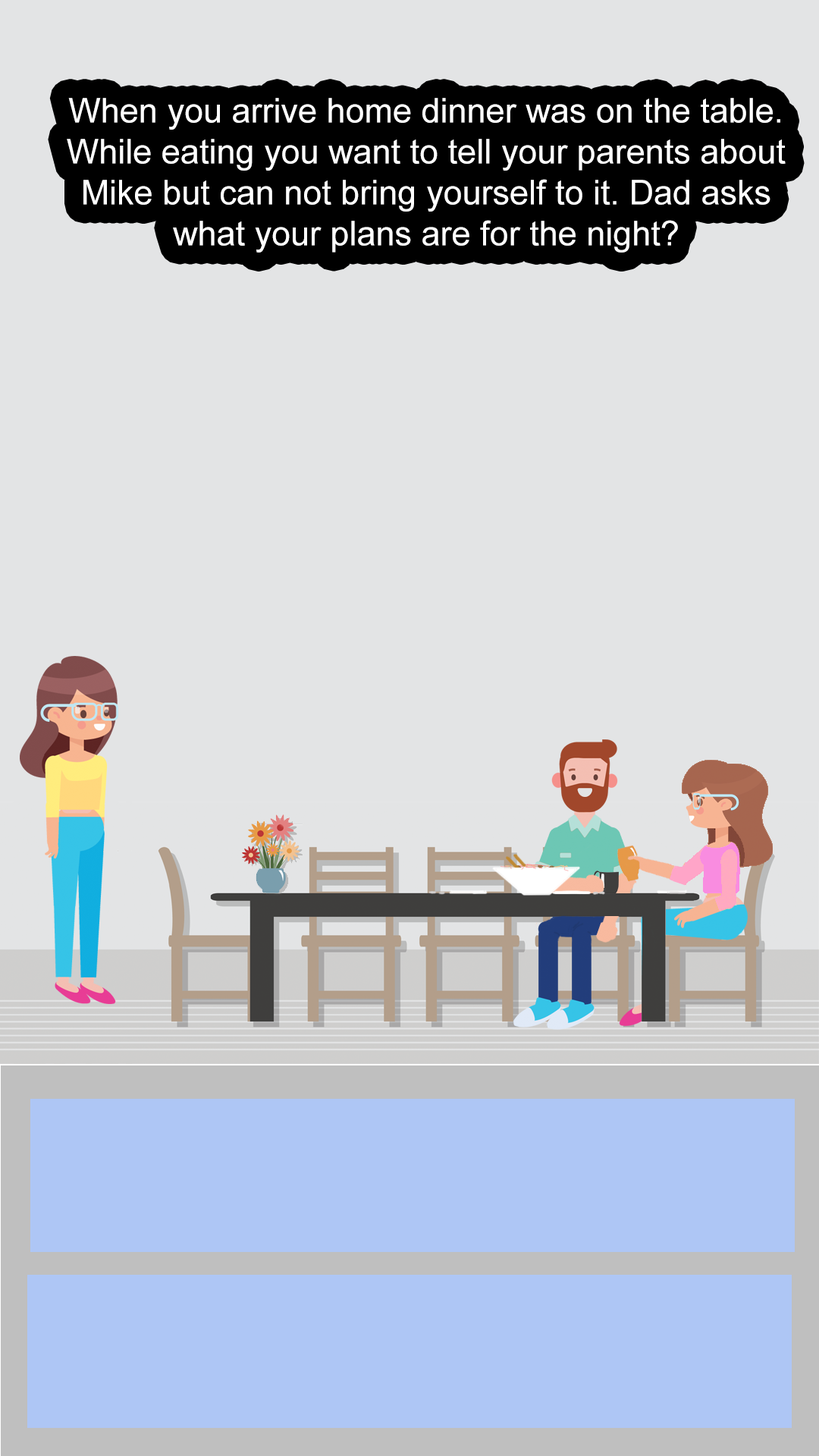
<style>
.page{position:relative;width:819px;height:1456px;background:#e3e4e5}
.page>*{position:absolute;margin:0}
.t1{font:34.1px "ArialMT";color:#ffffff}
</style>
<div class="page">
<p class="t1" style="left:67px;top:98px;width:719px;height:155px;text-align:center">When you arrive home dinner was on the table. While eating you want to tell your parents about Mike but can not bring yourself to it. Dad asks what your plans are for the night?</p>
</div>
